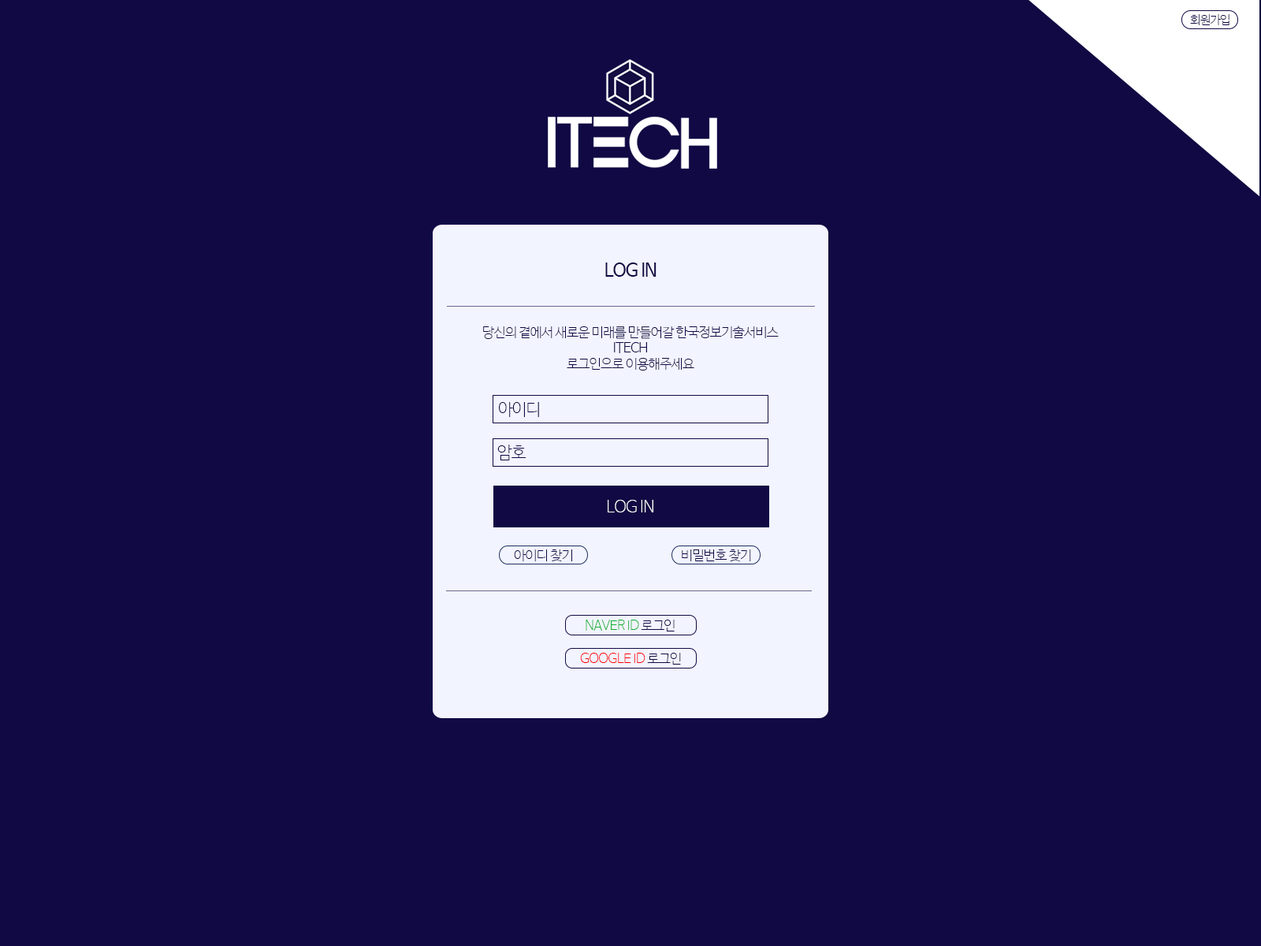
<style>
.page{position:relative;width:1261px;height:946px;background:#100943}
.page>*{position:absolute;margin:0}
.t1{font:11.8px "NanumBarunGothicUltraLight";letter-spacing:-0.045em;color:#100943}
.t2{font:18.1px "NanumBarunGothic";letter-spacing:-0.045em;color:#100943}
.t3{font:13.4px "NanumBarunGothicUltraLight";letter-spacing:-0.045em;color:#100943}
.t4{font:13.4px/15.8px "NanumBarunGothicLight";letter-spacing:-0.045em;color:#100943}
.t5{font:16.5px "NanumBarunGothicUltraLight";letter-spacing:-0.045em;color:#100943}
.t6{font:16.5px "NanumBarunGothicUltraLight";letter-spacing:-0.045em;color:#ffffff}
.t7{font:13.4px "NanumBarunGothicUltraLight";letter-spacing:-0.045em;color:#11b02f}
.t8{font:13.4px "NanumBarunGothicUltraLight";letter-spacing:-0.045em;color:#ff0000}
</style>
<div class="page">
<p class="t1" style="left:1190px;top:14px;width:39px;height:11px">회원가입</p>
<p class="t2" style="left:605px;top:262px;width:51px;height:15px">LOG IN</p>
<p class="t3" style="left:483px;top:325px;width:296px;height:45px;text-align:center">당신의 곁에서 새로운 미래를 만들어갈 한국정보기술서비스<br><span class="t4">ITECH<br></span>로그인으로 이용해주세요</p>
<p class="t5" style="left:499px;top:402px;width:40px;height:15px">아이디</p>
<p class="t5" style="left:497px;top:444px;width:29px;height:16px">암호</p>
<p class="t6" style="left:608px;top:500px;width:45px;height:12px">LOG IN</p>
<p class="t3" style="left:514px;top:549px;width:58px;height:12px">아이디 찾기</p>
<p class="t3" style="left:682px;top:549px;width:69px;height:12px">비밀번호 찾기</p>
<p class="t7" style="left:586px;top:619px;width:89px;height:12px">NAVER ID<span class="t3"> 로그인</span></p>
<p class="t8" style="left:580px;top:653px;width:101px;height:11px">GOOGLE ID<span class="t3"> 로그인</span></p>
</div>
